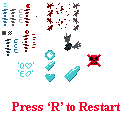
<style>
.page{position:relative;width:128px;height:128px;background:#ffffff}
.page>*{position:absolute;margin:0}
.t1{font:13px "TimesNewRomanPS-BoldMT";color:#ff002a}
</style>
<div class="page">
<p class="t1" style="left:12px;top:102px;width:108px;height:9px">Press ‘R’ to Restart</p>
</div>
